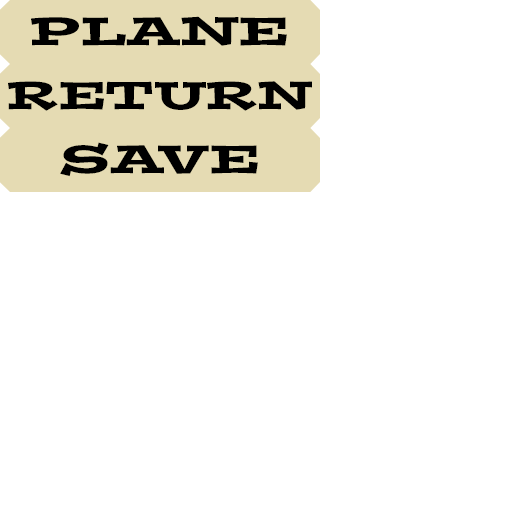
<style>
.page{position:relative;width:512px;height:512px;background:#ffffff}
.page>*{position:absolute;margin:0}
.t1{font:39.5px "PostinoStd";color:#000000;scale:1.32 1}
.t2{font:38.8px "PostinoStd";color:#000000;scale:1.26 1}
</style>
<div class="page">
<p class="t1" style="left:31px;top:16px;width:256px;height:30px">PLANE</p>
<p class="t2" style="left:8px;top:81px;width:304px;height:30px">RETURN</p>
<p class="t1" style="left:60px;top:142px;width:198px;height:35px">SAVE</p>
</div>
